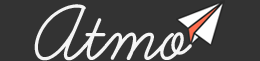
<style>
.page{position:relative;width:260px;height:61px;background:#333333}
.page>*{position:absolute;margin:0}
.t1{font:84.9px "LearningCurve-Bold";color:#f5f5f5}
</style>
<div class="page">
<p class="t1" style="left:34px;top:4px;width:158px;height:57px">Atmo</p>
</div>
